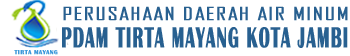
<style>
.page{position:relative;width:350px;height:56px;background:#ffffff}
.page>*{position:absolute;margin:0}
.t1{font:17.6px "AgencyFB-Reg";letter-spacing:0.05em;color:#286090;font-weight:bold;scale:1.33 1}
.t2{font:29.5px "BritannicBold";letter-spacing:0.05em;color:#286090;font-weight:bold;scale:0.58 1}
</style>
<div class="page">
<p class="t1" style="left:63px;top:6px;width:285px;height:15px">PERUSAHAAN DAERAH AIR MINUM</p>
<p class="t2" style="left:62px;top:27px;width:286px;height:21px">PDAM TIRTA MAYANG KOTA JAMBI</p>
</div>
